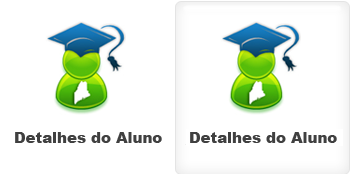
<style>
.page{position:relative;width:350px;height:174px;background:#ffffff}
.page>*{position:absolute;margin:0}
.t1{font:14.9px "Arial-Black";color:#404040}
</style>
<div class="page">
<p class="t1" style="left:15px;top:132px;width:147px;height:11px">Detalhes do Aluno</p>
<p class="t1" style="left:190px;top:132px;width:147px;height:11px">Detalhes do Aluno</p>
</div>
